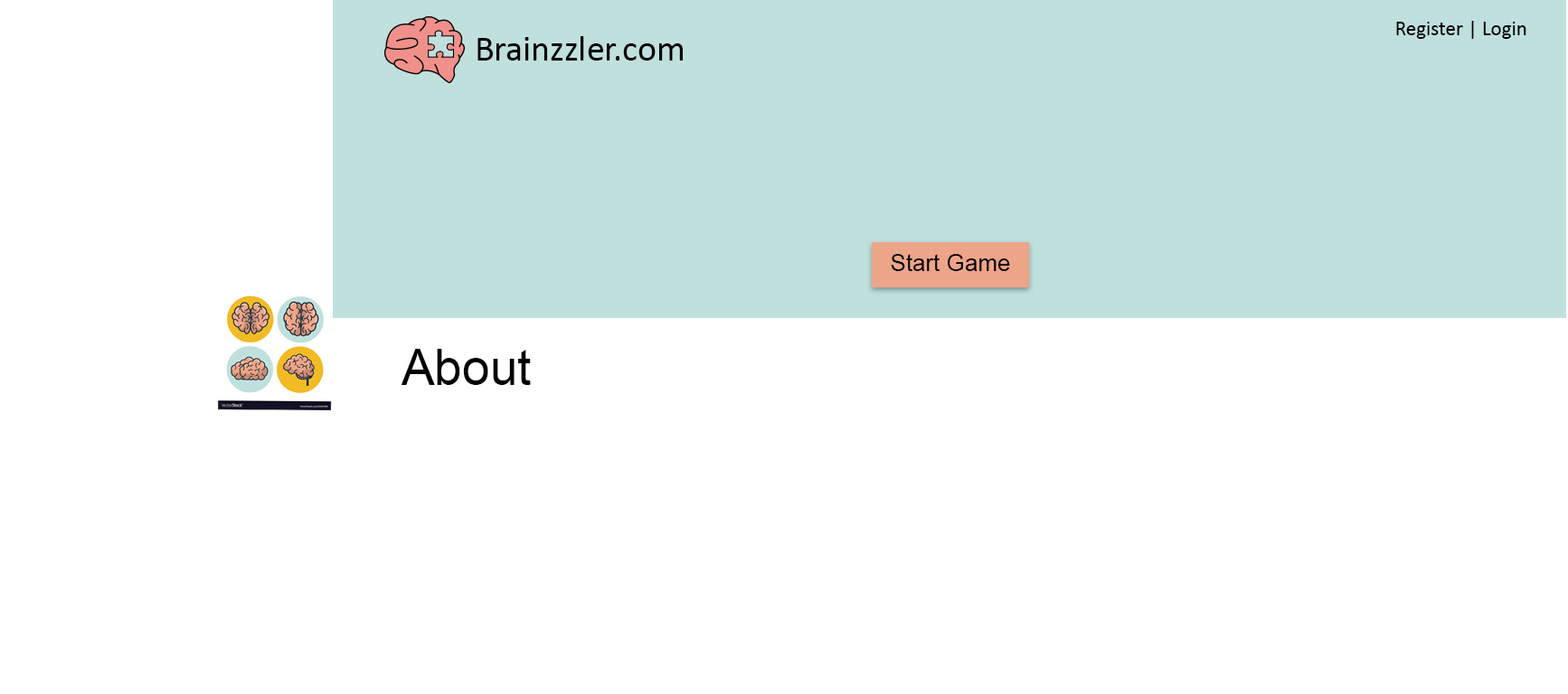
<style>
.page{position:relative;width:1568px;height:694px;background:#ffffff}
.page>*{position:absolute;margin:0}
.t1{font:20.8px "Calibri";color:#000000}
.t2{font:35.9px "Calibri";color:#000000}
.t3{font:23.5px "ArialMT";color:#010000}
.t4{font:49.7px "ArialMT";color:#000000}
</style>
<div class="page">
<p class="t1" style="left:1396px;top:21px;width:130px;height:18px">Register | Login</p>
<p class="t2" style="left:477px;top:36px;width:206px;height:25px">Brainzzler.com</p>
<p class="t3" style="left:891px;top:254px;width:119px;height:17px">Start Game</p>
<p class="t4" style="left:401px;top:349px;width:130px;height:36px">About</p>
</div>
